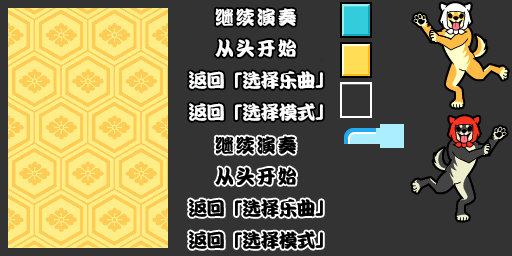
<style>
.page{position:relative;width:512px;height:256px;background:#333333}
.page>*{position:absolute;margin:0}
.t1{font:19px "DFPKanTingLiuW9";letter-spacing:0.1em;color:#ffffff}
.t2{font:19px "DFPKanTingLiuW9";letter-spacing:-0.05em;color:#ffffff}
.t3{font:19px "DFPKanTingLiuW9";letter-spacing:0.1em;color:#000000}
.t4{font:19px "DFPKanTingLiuW9";letter-spacing:-0.05em;color:#000000}
</style>
<div class="page">
<p class="t1" style="left:215px;top:8px;width:81px;height:18px">继续演奏</p>
<p class="t1" style="left:215px;top:39px;width:81px;height:18px">从头开始</p>
<p class="t2" style="left:189px;top:71px;width:134px;height:18px">返回「选择乐曲」</p>
<p class="t2" style="left:189px;top:103px;width:134px;height:18px">返回「选择模式」</p>
<p class="t3" style="left:215px;top:136px;width:81px;height:18px">继续演奏</p>
<p class="t3" style="left:215px;top:167px;width:81px;height:18px">从头开始</p>
<p class="t4" style="left:189px;top:199px;width:134px;height:18px">返回「选择乐曲」</p>
<p class="t4" style="left:189px;top:231px;width:134px;height:18px">返回「选择模式」</p>
</div>
